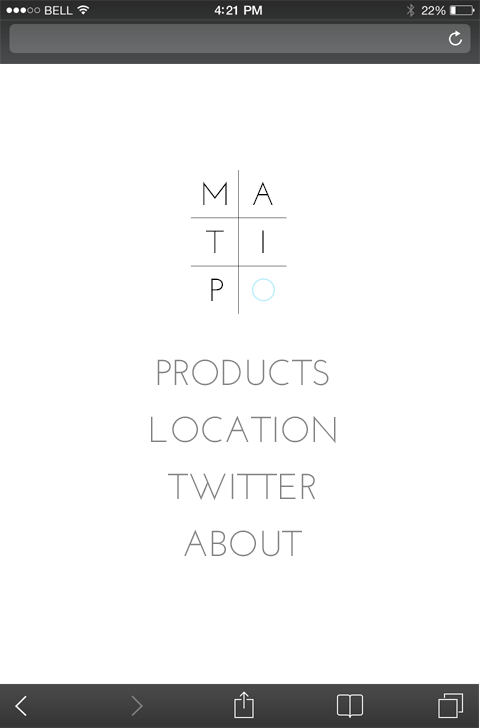
<style>
.page{position:relative;width:480px;height:728px;background:#ffffff}
.page>*{position:absolute;margin:0}
.t1{font:32.1px "JosefinSans";color:#000000}
.t2{font:32.1px "JosefinSans"}
.t3{font:32.1px "JosefinSans";color:#b6ecfb}
.t4{font:36px "JosefinSans";color:#7f7f7f}
</style>
<div class="page">
<p class="t1" style="left:203px;top:181px;width:24px;height:24px">M</p>
<p class="t1" style="left:253px;top:181px;width:20px;height:24px">A</p>
<p class="t2" style="left:206px;top:230px;width:18px;height:23px">T</p>
<p class="t2" style="left:262px;top:230px;width:2px;height:23px">I</p>
<p class="t1" style="left:211px;top:278px;width:12px;height:23px">P</p>
<p class="t3" style="left:252px;top:278px;width:23px;height:24px">O</p>
<p class="t4" style="left:157px;top:359px;width:172px;height:27px">PRODUCTS</p>
<p class="t4" style="left:151px;top:415px;width:185px;height:29px">LOCATION</p>
<p class="t4" style="left:168px;top:473px;width:147px;height:27px">TWITTER</p>
<p class="t4" style="left:184px;top:529px;width:118px;height:28px">ABOUT</p>
</div>
